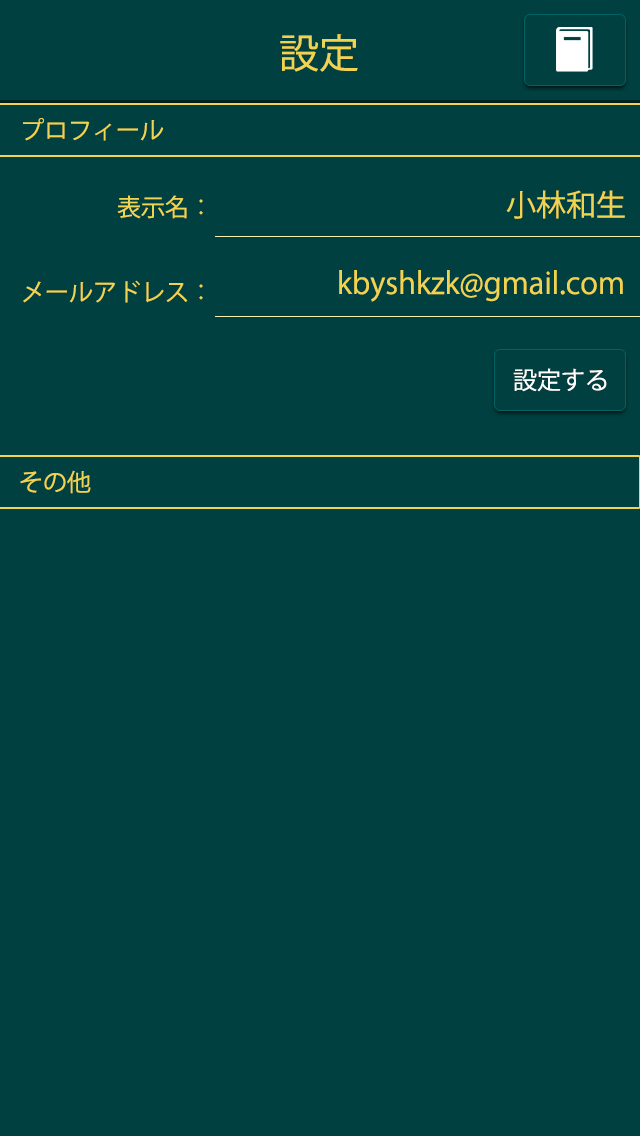
<style>
.page{position:relative;width:640px;height:1136px;background:#004040}
.page>*{position:absolute;margin:0}
.t1{font:40px "KozGoPr6N-Regular";color:#f0d351}
.t2{font:24px "KozGoPr6N-Regular";color:#f0d351}
.t3{font:30px "KozGoPr6N-Regular";color:#f0d351}
.t4{font:24px "KozGoPr6N-Regular";color:#ffffff}
</style>
<div class="page">
<p class="t1" style="left:280px;top:34px;width:78px;height:38px">設定</p>
<p class="t2" style="left:23px;top:118px;width:141px;height:23px">プロフィール</p>
<p class="t2" style="left:117px;top:195px;width:86px;height:24px">表示名：</p>
<p class="t3" style="left:506px;top:190px;width:119px;height:29px">小林和生</p>
<p class="t3" style="left:339px;top:270px;width:284px;height:32px">kbyshkzk@gmail.com</p>
<p class="t2" style="left:23px;top:280px;width:180px;height:23px">メールアドレス：</p>
<p class="t4" style="left:513px;top:368px;width:94px;height:24px">設定する</p>
<p class="t2" style="left:20px;top:470px;width:71px;height:24px">その他</p>
</div>
